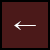
<style>
.page{position:relative;width:50px;height:50px;background:#4b1919}
.page>*{position:absolute;margin:0}
.t1{font:24px "H2gtrE";color:#ffffff}
</style>
<div class="page">
<p class="t1" style="left:14px;top:21px;width:22px;height:9px">←</p>
</div>
